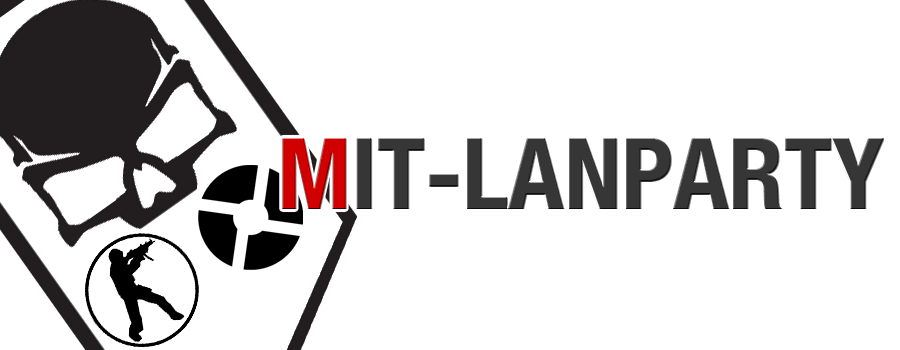
<style>
.page{position:relative;width:900px;height:350px;background:#ffffff}
.page>*{position:absolute;margin:0}
.t1{font:100px "HelveticaNeue-CondensedBold";color:#363636}
.t2{font:100px "HelveticaNeue-CondensedBold";color:#d10000}
</style>
<div class="page">
<p class="t1" style="left:282px;top:138px;width:602px;height:71px"><span class="t2">M</span>IT-LANPARTY</p>
</div>
